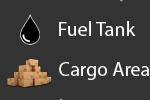
<style>
.page{position:relative;width:150px;height:100px;background:#333333}
.page>*{position:absolute;margin:0}
.t1{font:20.1px "MyriadPro-Regular";color:#ffffff}
.t2{font:19.8px "MyriadPro-Regular";color:#ffffff}
</style>
<div class="page">
<p class="t1" style="left:59px;top:21px;width:77px;height:15px">Fuel Tank</p>
<p class="t2" style="left:59px;top:62px;width:90px;height:18px">Cargo Area</p>
</div>
